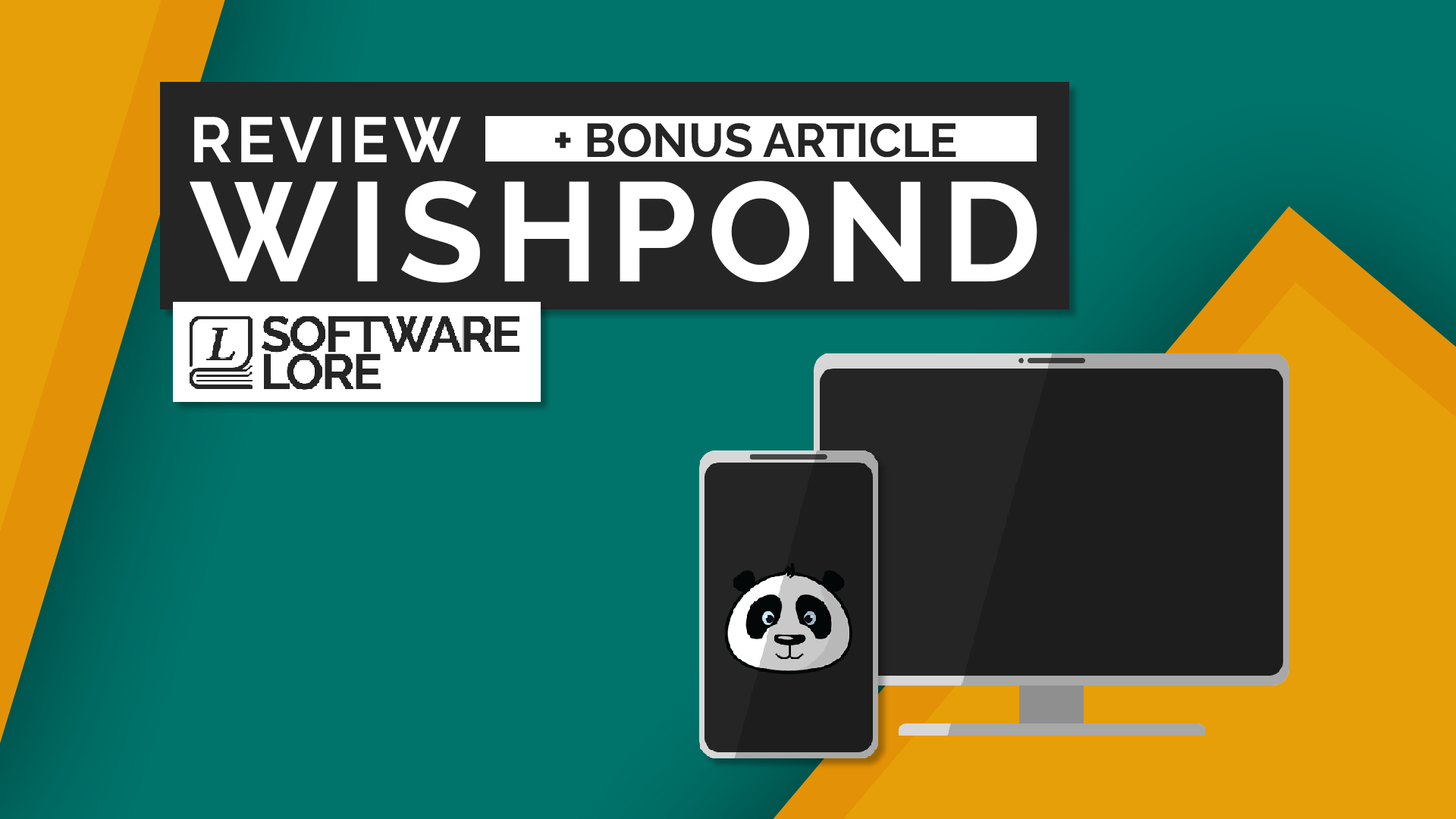
<style>
.page{position:relative;width:1456px;height:819px;background:#00746b}
.page>*{position:absolute;margin:0}
.t1{font:63.7px "Raleway-Bold";letter-spacing:0.075em;color:#ffffff;text-transform:uppercase}
.t2{font:47.5px "Raleway-Bold";color:#252525;text-transform:uppercase}
.t3{font:140.1px "Raleway-Bold";letter-spacing:0.075em;color:#ffffff;text-transform:uppercase}
</style>
<div class="page">
<p class="t1" style="left:194px;top:117px;width:267px;height:45px">Review</p>
<p class="t2" style="left:555px;top:123px;width:401px;height:35px">+ Bonus article</p>
<p class="t3" style="left:190px;top:180px;width:847px;height:103px">wishpond</p>
</div>
